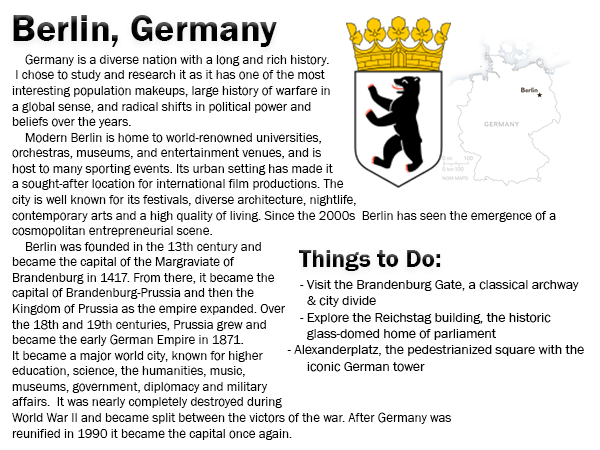
<style>
.page{position:relative;width:600px;height:450px;background:#ffffff}
.page>*{position:absolute;margin:0}
.t1{font:38.1px "FranklinGothic-Demi";color:#000000}
.t2{font:13px "FranklinGothic-Book";color:#000000}
.t3{font:25px "FranklinGothic-Demi";color:#000000}
.t4{font:13.6px "FranklinGothic-Book";color:#000000}
</style>
<div class="page">
<p class="t1" style="left:13px;top:15px;width:264px;height:32px">Berlin, Germany</p>
<p class="t2" style="left:12px;top:54px;width:544px;height:386px">Germany is a diverse nation with a long and rich history.<br> I chose to study and research it as it has one of the most <br>interesting population makeups, large history of warfare in<br>a global sense, and radical shifts in political power and <br>beliefs over the years.<br>    Modern Berlin is home to world-renowned universities, <br>orchestras, museums, and entertainment venues, and is <br>host to many sporting events. Its urban setting has made it <br>a sought-after location for international film productions. The <br>city is well known for its festivals, diverse architecture, nightlife,<br>contemporary arts and a high quality of living. Since the 2000s  Berlin has seen the emergence of a <br>cosmopolitan entrepreneurial scene.<br>    Berlin was founded in the 13th century and <br>became the capital of the Margraviate of <br>Brandenburg in 1417. From there, it became the <br>capital of Brandenburg-Prussia and then the <br>Kingdom of Prussia as the empire expanded. Over <br>the 18th and 19th centuries, Prussia grew and <br>became the early German Empire in 1871. <br>It became a major world city, known for higher <br>education, science, the humanities, music, <br>museums, government, diplomacy and military <br>affairs.  It was nearly completely destroyed during <br>World War II and became split between the victors of the war. After Germany was <br>reunified in 1990 it became the capital once again.</p>
<p class="t3" style="left:299px;top:250px;width:142px;height:21px">Things to Do:</p>
<p class="t4" style="left:287px;top:280px;width:297px;height:92px">- Visit the Brandenburg Gate, a classical archway <br>   &amp; city divide<br> - Explore the Reichstag building, the historic <br>   glass-domed home of parliament<br>      - Alexanderplatz, the pedestrianized square with the <br>   iconic German tower</p>
</div>
